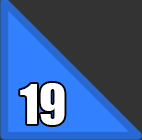
<style>
.page{position:relative;width:142px;height:140px;background:#333333}
.page>*{position:absolute;margin:0}
.t1{font:50px "Impact";color:#ffffff}
</style>
<div class="page">
<p class="t1" style="left:20px;top:83px;width:45px;height:42px">19</p>
</div>
